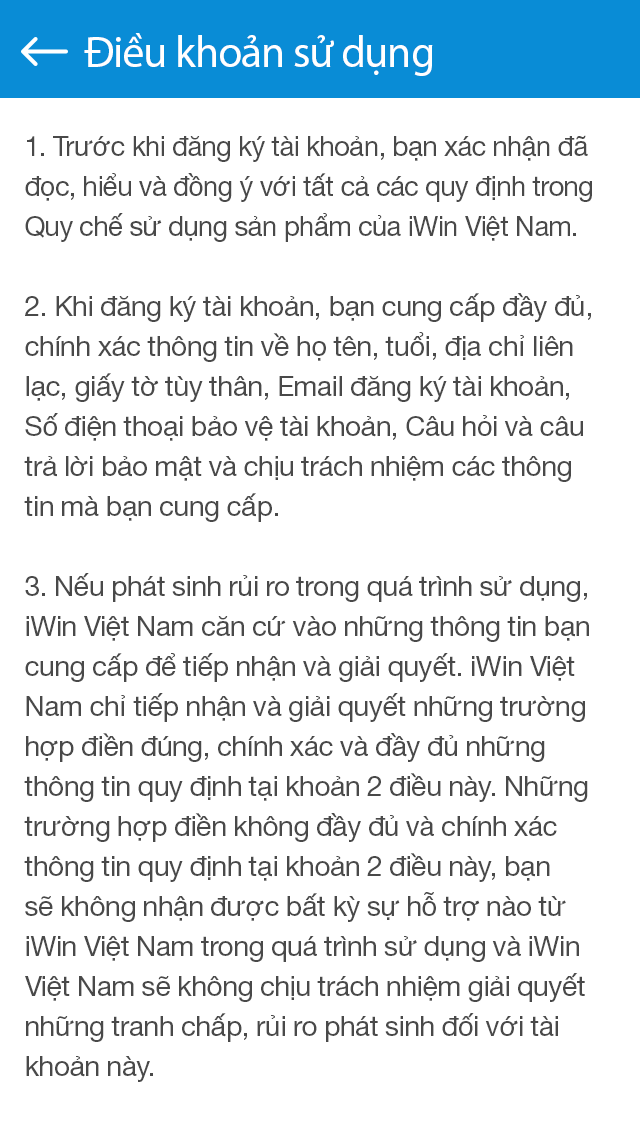
<style>
.page{position:relative;width:640px;height:1136px;background:#ffffff}
.page>*{position:absolute;margin:0}
.t1{font:44px "MyriadPro-Regular";letter-spacing:-0.025em;color:#ffffff}
.t2{font:28px/40px "HelveticaNeue-Regular";letter-spacing:-0.025em;color:#494949}
</style>
<div class="page">
<p class="t1" style="left:84px;top:33px;width:349px;height:43px">Điều khoản sử dụng</p>
<p class="t2" style="left:24px;top:135px;width:568px;height:947px">1. Trước khi đăng ký tài khoản, bạn xác nhận đã đọc, hiểu và đồng ý với tất cả các quy định trong Quy chế sử dụng sản phẩm của iWin Việt Nam.<br><br>2. Khi đăng ký tài khoản, bạn cung cấp đầy đủ, chính xác thông tin về họ tên, tuổi, địa chỉ liên lạc, giấy tờ tùy thân, Email đăng ký tài khoản, Số điện thoại bảo vệ tài khoản, Câu hỏi và câu trả lời bảo mật và chịu trách nhiệm các thông tin mà bạn cung cấp.<br><br>3. Nếu phát sinh rủi ro trong quá trình sử dụng, iWin Việt Nam căn cứ vào những thông tin bạn cung cấp để tiếp nhận và giải quyết. iWin Việt Nam chỉ tiếp nhận và giải quyết những trường hợp điền đúng, chính xác và đầy đủ những thông tin quy định tại khoản 2 điều này. Những trường hợp điền không đầy đủ và chính xác thông tin quy định tại khoản 2 điều này, bạn sẽ không nhận được bất kỳ sự hỗ trợ nào từ iWin Việt Nam trong quá trình sử dụng và iWin Việt Nam sẽ không chịu trách nhiệm giải quyết những tranh chấp, rủi ro phát sinh đối với tài khoản này.</p>
</div>
